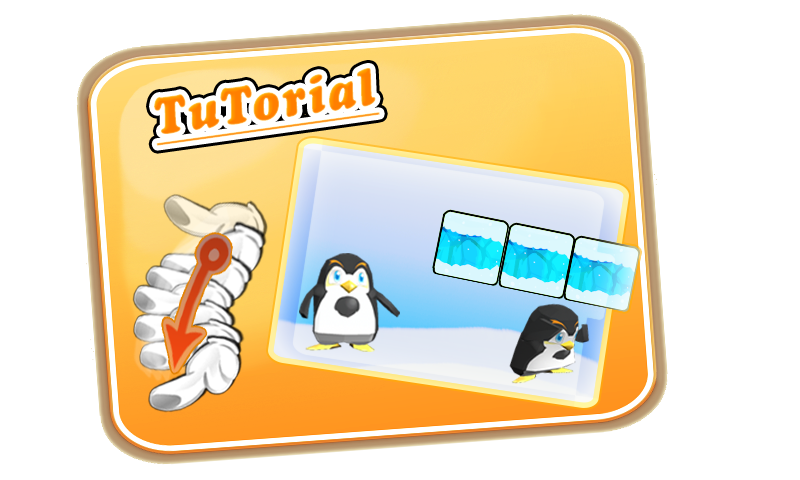
<style>
.page{position:relative;width:800px;height:480px;background:#ffffff}
.page>*{position:absolute;margin:0}
.t1{font:52.4px "CooperBlackStd-Italic";letter-spacing:0.04em;text-decoration:underline;scale:0.89 1}
</style>
<div class="page">
<p class="t1" style="left:154px;top:68px;width:226px;height:78px;rotate:-8deg">TuTorial</p>
</div>
